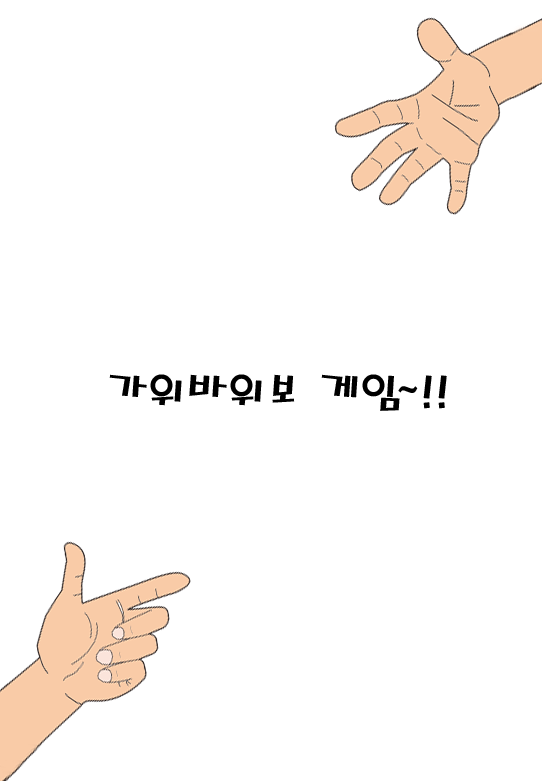
<style>
.page{position:relative;width:542px;height:781px;background:#ffffff}
.page>*{position:absolute;margin:0}
.t1{font:48px "MagicR-HM";color:#000000}
</style>
<div class="page">
<p class="t1" style="left:109px;top:374px;width:338px;height:37px">가위바위보 게임~!!</p>
</div>
